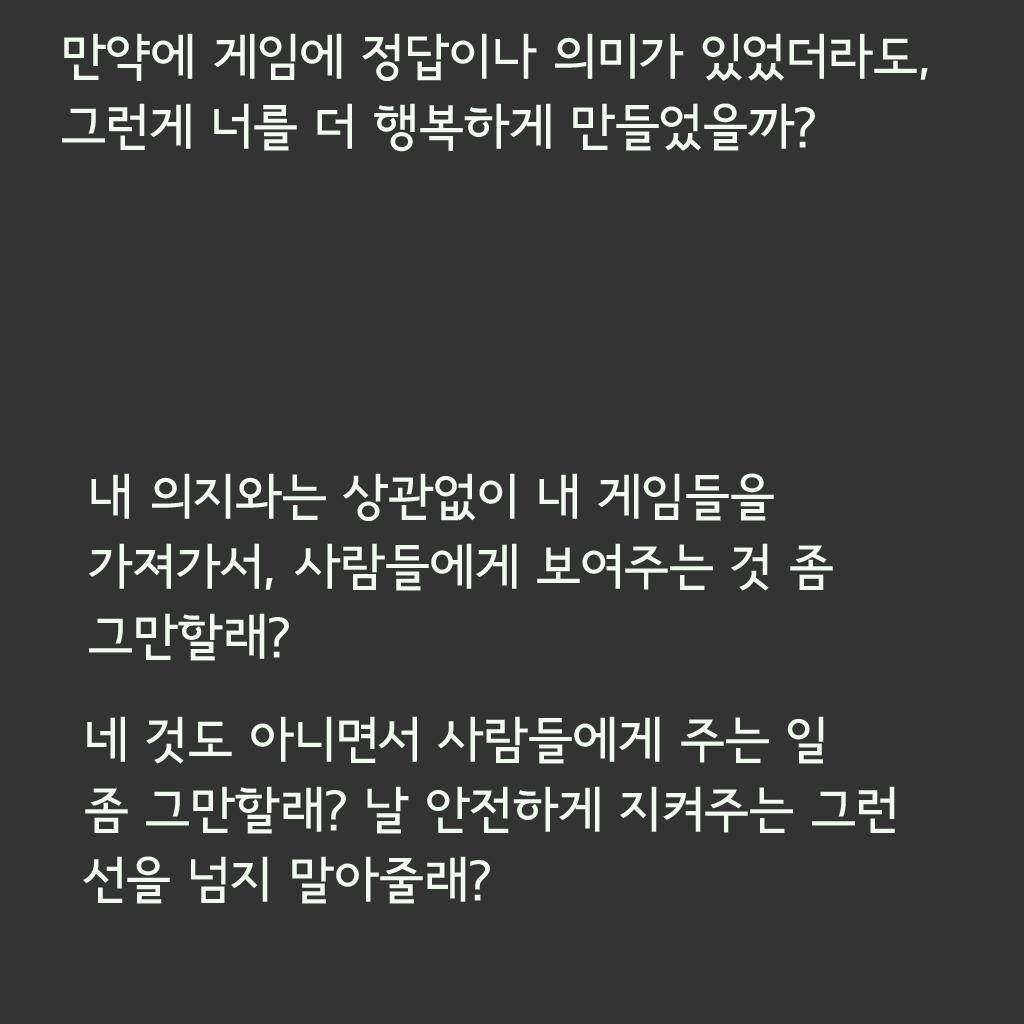
<style>
.page{position:relative;width:1024px;height:1024px;background:#333333}
.page>*{position:absolute;margin:0}
.t1{font:50px/70px "SeoulNamsanB";color:#f1f9f1}
</style>
<div class="page">
<p class="t1" style="left:62px;top:33px;width:866px;height:119px">만약에 게임에 정답이나 의미가 있었더라도, 그런게 너를 더 행복하게 만들었을까?</p>
<p class="t1" style="left:88px;top:473px;width:745px;height:188px">내 의지와는 상관없이 내 게임들을<br>가져가서, 사람들에게 보여주는 것 좀 그만할래?</p>
<p class="t1" style="left:83px;top:716px;width:812px;height:188px">네 것도 아니면서 사람들에게 주는 일<br>좀 그만할래? 날 안전하게 지켜주는 그런<br>선을 넘지 말아줄래?<br>넘지 말아줄래?</p>
</div>
